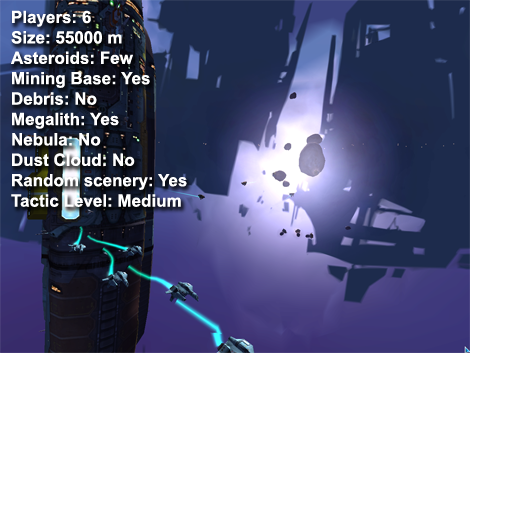
<style>
.page{position:relative;width:512px;height:512px;background:#ffffff}
.page>*{position:absolute;margin:0}
.t1{font:17px "Arial-BoldMT";color:#ffffff}
</style>
<div class="page">
<p class="t1" style="left:11px;top:10px;width:176px;height:197px">Players: 6<br>Size: 55000 m<br>Asteroids: Few<br>Mining Base: Yes<br>Debris: No<br>Megalith: Yes<br>Nebula: No<br>Dust Cloud: No<br>Random scenery: Yes<br>Tactic Level: Medium</p>
</div>
